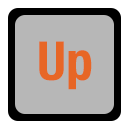
<style>
.page{position:relative;width:128px;height:128px;background:#b7b7b7}
.page>*{position:absolute;margin:0}
.t1{font:54px "HelveticaNeue-CondensedBold";color:#e76626}
</style>
<div class="page">
<p class="t1" style="left:39px;top:41px;width:53px;height:49px">Up</p>
</div>
